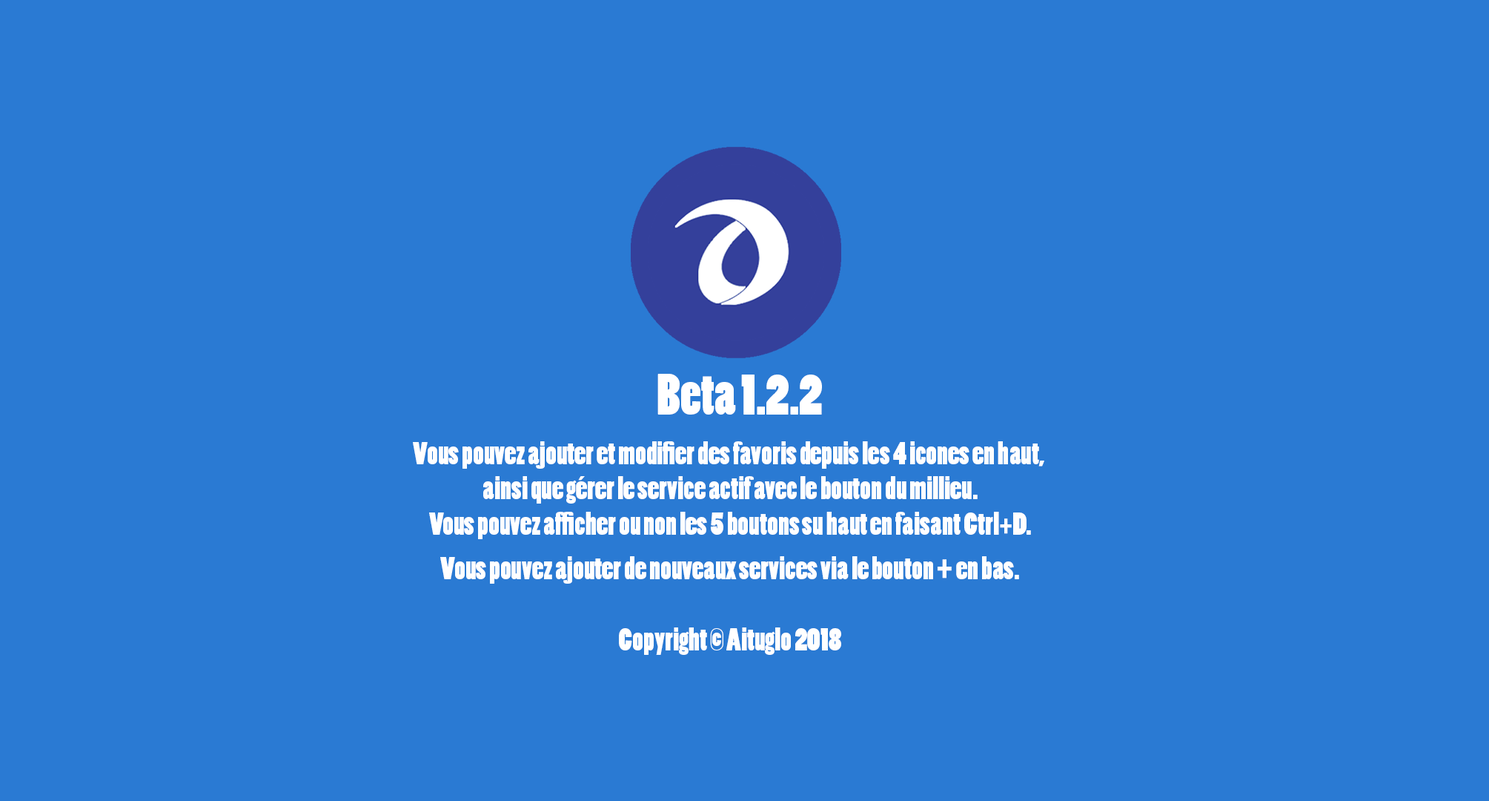
<style>
.page{position:relative;width:1489px;height:801px;background:#2a7ad3}
.page>*{position:absolute;margin:0}
.t1{font:54.5px "PoplarStd";color:#ffffff}
.t2{font:29.7px "PoplarStd";color:#ffffff}
.t3{font:37.1px "PoplarStd";color:#ffffff}
</style>
<div class="page">
<p class="t1" style="left:658px;top:374px;width:164px;height:40px">Beta 1.2.2</p>
<p class="t2" style="left:413px;top:441px;width:632px;height:214px;text-align:center">Vous pouvez ajouter et modifier des favoris depuis les 4 icones en haut, <br>ainsi que gérer le service actif avec le bouton du millieu.<br>Vous pouvez afficher ou non les 5 boutons su haut en faisant Ctrl+D.<br>Vous pouvez ajouter de nouveaux services via le bouton <span class="t3">+</span> en bas.<br><br>Copyright © Aituglo 2018</p>
</div>
